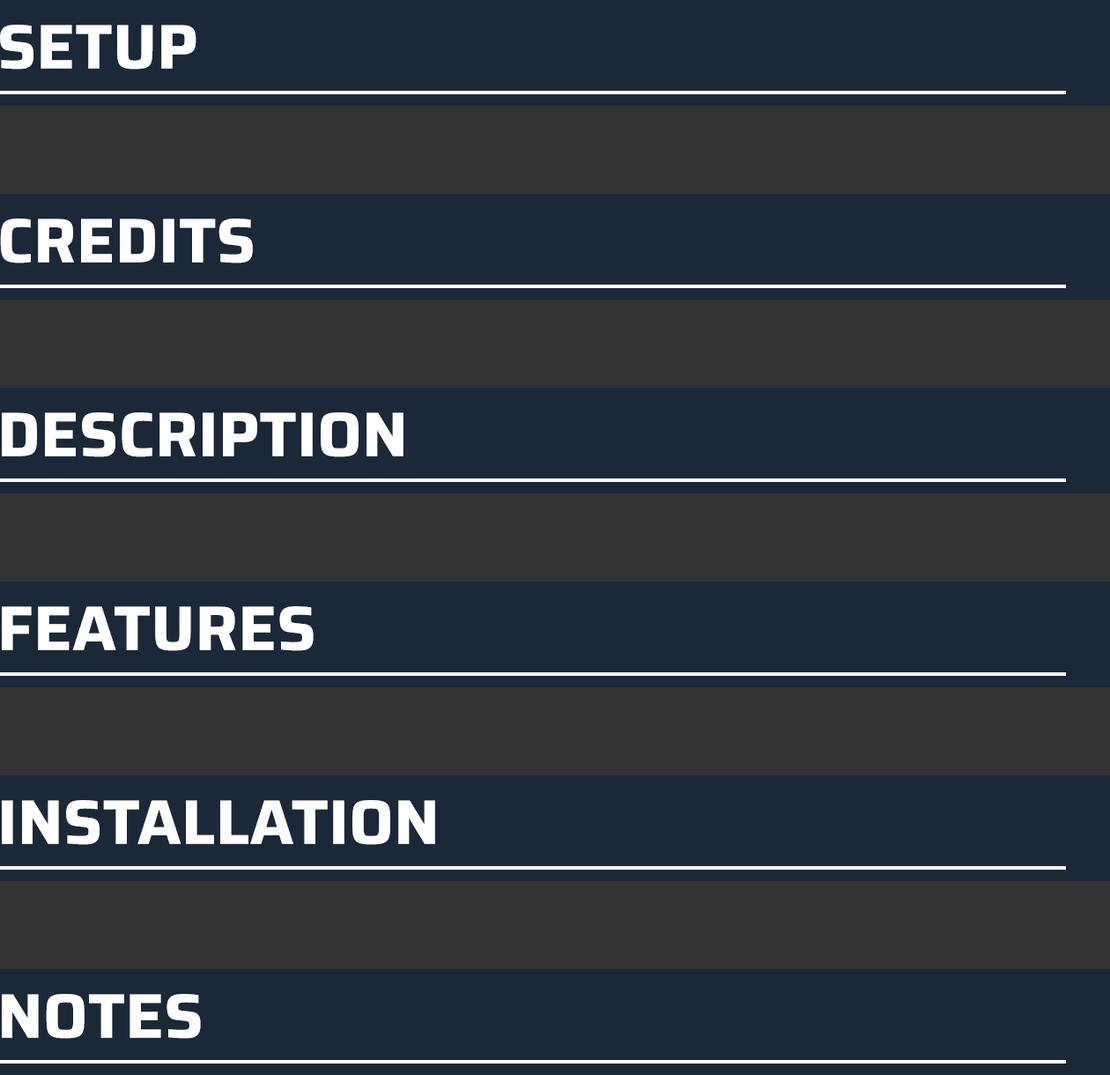
<style>
.page{position:relative;width:1110px;height:1075px;background:#1b2838}
.page>*{position:absolute;margin:0}
.t1{font:62.9px "SairaRoman-Bold";color:#ffffff;text-transform:uppercase}
</style>
<div class="page">
<p class="t1" style="left:0px;top:25px;width:196px;height:45px">Setup</p>
<p class="t1" style="left:0px;top:218px;width:253px;height:45px">Credits</p>
<p class="t1" style="left:2px;top:412px;width:401px;height:45px">Description</p>
<p class="t1" style="left:2px;top:606px;width:312px;height:45px">Features</p>
<p class="t1" style="left:2px;top:800px;width:433px;height:45px">Installation</p>
<p class="t1" style="left:2px;top:993px;width:199px;height:45px">Notes</p>
</div>
